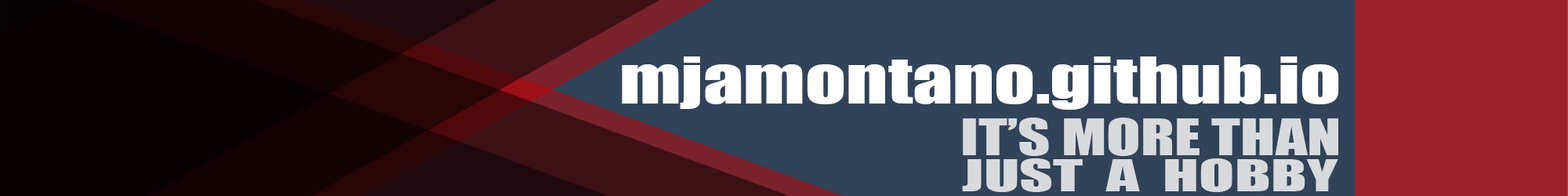
<style>
.page{position:relative;width:1568px;height:196px;background:#314359}
.page>*{position:absolute;margin:0}
.t1{font:59.4px "Impact";color:#ffffff;scale:1.35 1}
.t2{font:46.6px "Impact";color:#d8dadd;scale:1.35 1}
.t3{font:40.8px "Impact";color:#d8dadd;scale:1.6 1}
</style>
<div class="page">
<p class="t1" style="left:622px;top:56px;width:717px;height:54px">mjamontano.github.io</p>
<p class="t2" style="left:963px;top:118px;width:375px;height:38px">IT’S MORE THAN</p>
<p class="t3" style="left:962px;top:158px;width:376px;height:34px">JUST  A  HOBBY</p>
</div>
